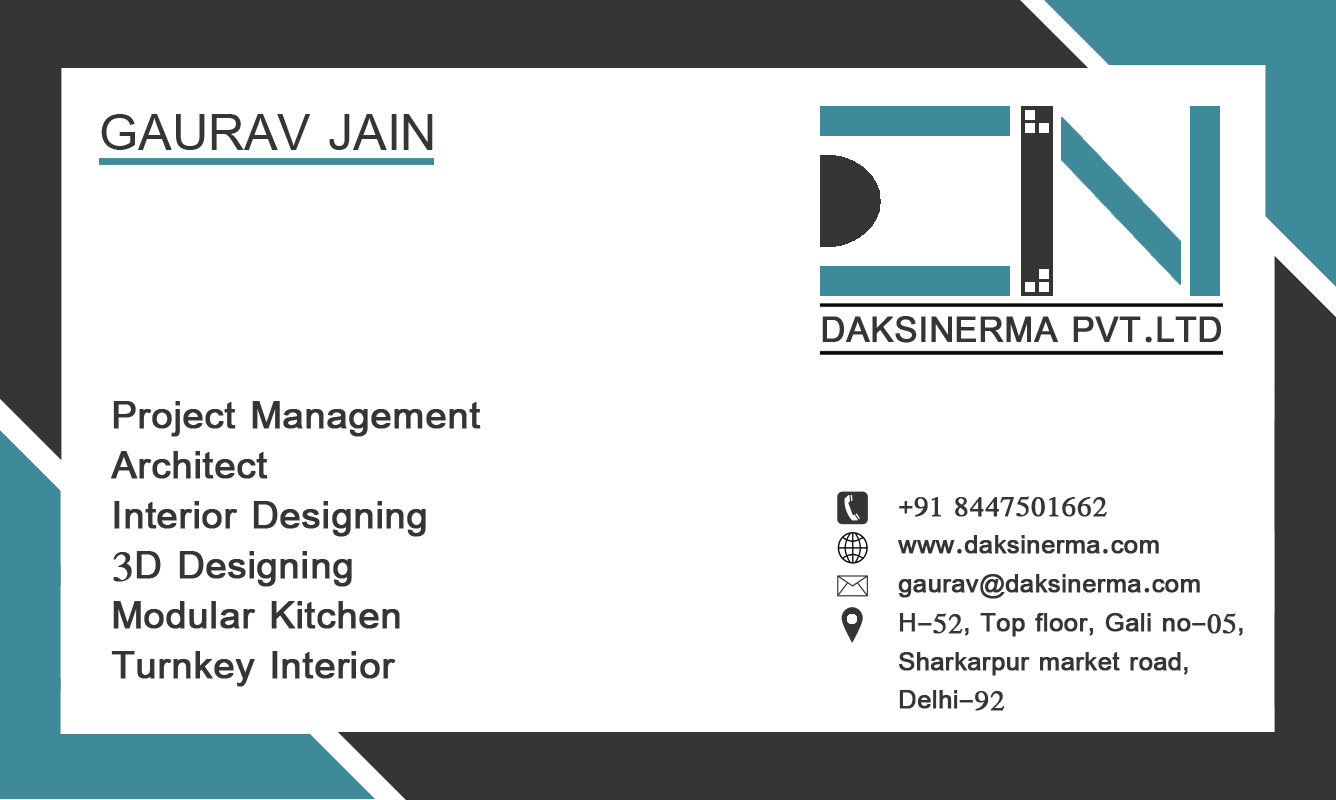
<style>
.page{position:relative;width:1336px;height:800px;background:#ffffff}
.page>*{position:absolute;margin:0}
.t1{font:55.6px "SimplifiedArabic";color:#353535}
.t2{font:38.9px "SimplifiedArabic";color:#353535;font-weight:bold}
.t3{font:41.7px "SimplifiedArabic";color:#353535;font-weight:bold}
.t4{font:27.8px/38.9px "SimplifiedArabic";color:#353535;font-weight:bold}
</style>
<div class="page">
<p class="t1" style="left:101px;top:114px;width:332px;height:36px">GAURAV JAIN</p>
<p class="t2" style="left:822px;top:316px;width:399px;height:27px">DAKSINERMA PVT.LTD</p>
<p class="t3" style="left:111px;top:401px;width:370px;height:286px">Project Management<br>Architect<br>Interior Designing<br>3D Designing<br>Modular Kitchen <br>Turnkey Interior</p>
<p class="t4" style="left:898px;top:496px;width:345px;height:215px">+91 8447501662<br>www.daksinerma.com<br>gaurav@daksinerma.com<br>H-52, Top floor, Gali no-05,<br>Sharkarpur market road,<br>Delhi-92</p>
</div>
